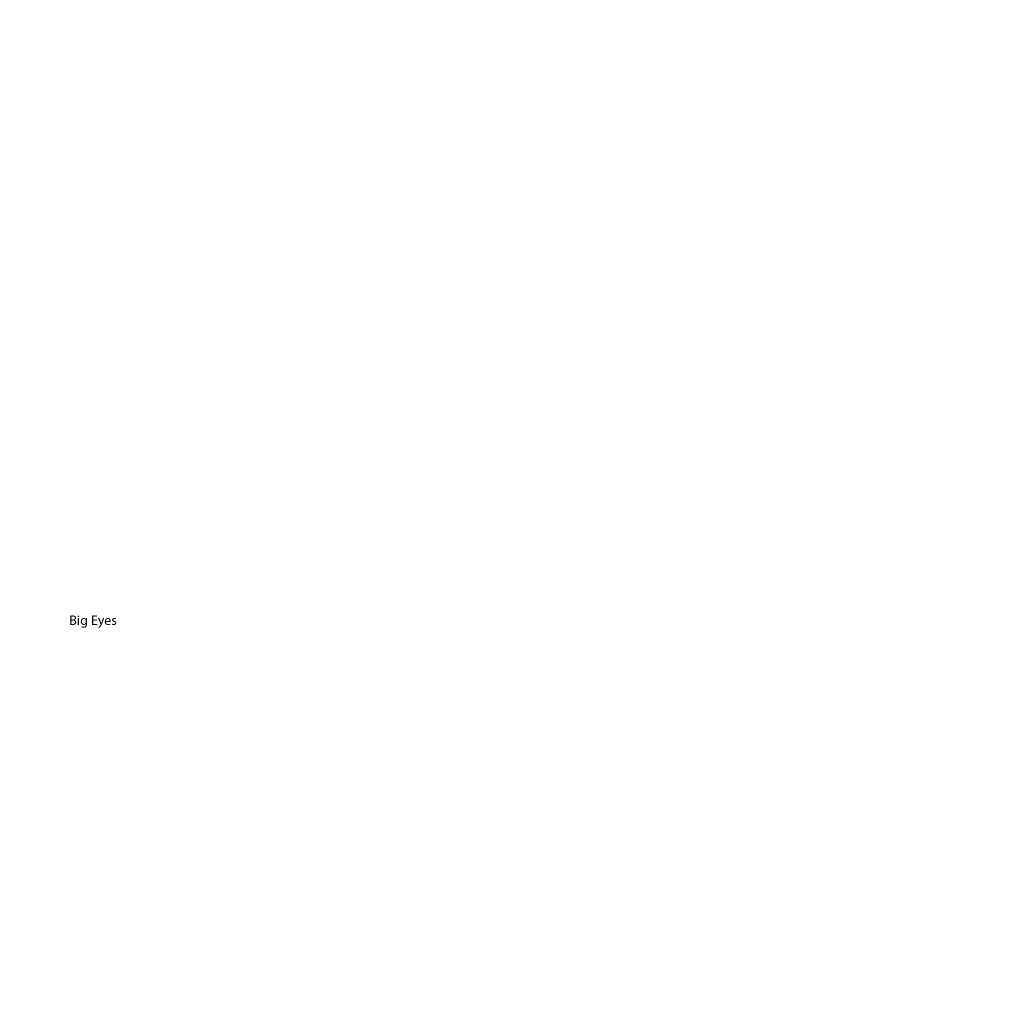
<style>
.page{position:relative;width:1020px;height:1020px;background:#ffffff}
.page>*{position:absolute;margin:0}
.t1{font:14px "MyriadPro-Regular";color:#000000}
</style>
<div class="page">
<p class="t1" style="left:70px;top:615px;width:47px;height:13px">Big Eyes</p>
</div>
